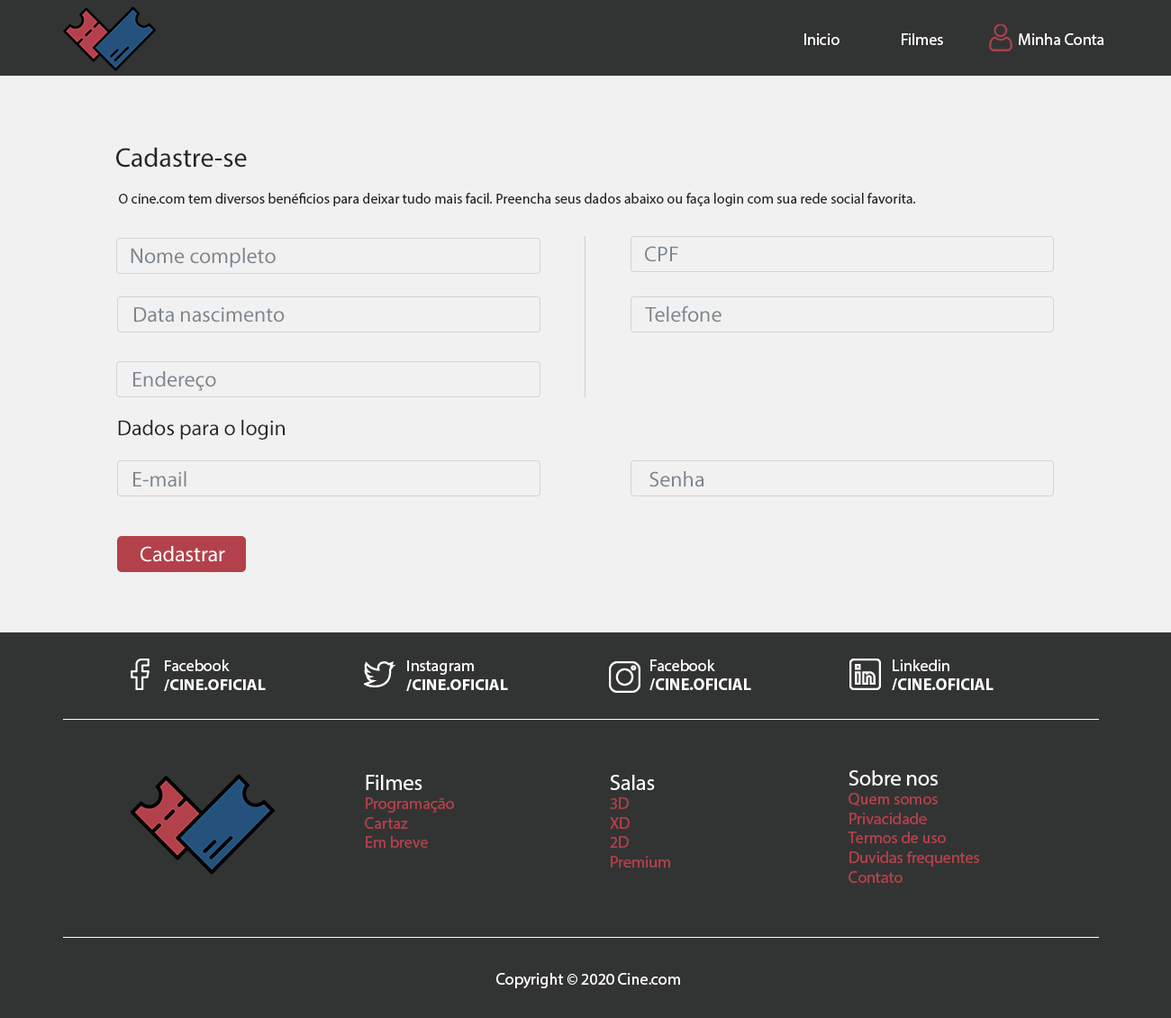
<style>
.page{position:relative;width:1171px;height:1018px;background:#f1f1f1}
.page>*{position:absolute;margin:0}
.t1{font:16.2px "MyriadPro-Regular";color:#ffffff}
.t2{font:27px "MyriadPro-Regular";color:#212529}
.t3{font:14.4px "MyriadPro-Regular";color:#212529}
.t4{font:21.6px "MyriadPro-Regular";color:#7d858c}
.t5{font:21.6px "MyriadPro-Regular";color:#212529}
.t6{font:21.6px "MyriadPro-Regular";color:#ffffff}
.t7{font:16px "MyriadPro-Bold";color:#ffffff}
.t8{font:16px "MyriadPro-Regular";color:#ffffff}
.t9{font:16.2px "MyriadPro-Bold";color:#ffffff}
.t10{font:16.2px "MyriadPro-Regular";color:#b3414b}
</style>
<div class="page">
<p class="t1" style="left:805px;top:33px;width:300px;height:12px">Inicio  Filmes        Minha Conta</p>
<p class="t2" style="left:116px;top:147px;width:131px;height:21px">Cadastre-se</p>
<p class="t3" style="left:119px;top:193px;width:797px;height:13px">O cine.com tem diversos benéficios para deixar tudo mais facil. Preencha seus dados abaixo ou faça login com sua rede social favorita.</p>
<p class="t4" style="left:645px;top:246px;width:33px;height:16px">CPF</p>
<p class="t4" style="left:131px;top:248px;width:145px;height:20px">Nome completo</p>
<p class="t4" style="left:645px;top:305px;width:77px;height:18px">Telefone</p>
<p class="t4" style="left:134px;top:307px;width:151px;height:16px">Data nascimento</p>
<p class="t4" style="left:133px;top:371px;width:83px;height:20px">Endereço</p>
<p class="t5" style="left:118px;top:420px;width:167px;height:20px">Dados para o login</p>
<p class="t4" style="left:133px;top:471px;width:53px;height:16px">E-mail</p>
<p class="t4" style="left:650px;top:471px;width:55px;height:16px">Senha</p>
<p class="t6" style="left:141px;top:546px;width:84px;height:16px">Cadastrar</p>
<p class="t7" style="left:164px;top:660px;width:102px;height:31px"><span class="t8">Facebook<br></span>/CINE.OFICIAL</p>
<p class="t7" style="left:406px;top:660px;width:102px;height:31px"><span class="t8">Instagram<br></span>/CINE.OFICIAL</p>
<p class="t9" style="left:650px;top:660px;width:101px;height:30px"><span class="t1">Facebook<br></span>/CINE.OFICIAL</p>
<p class="t9" style="left:892px;top:660px;width:102px;height:30px"><span class="t1">Linkedin<br></span>/CINE.OFICIAL</p>
<p class="t10" style="left:848px;top:770px;width:131px;height:113px"><span class="t6">Sobre nos<br></span>Quem somos<br>Privacidade<br>Termos de uso<br>Duvidas frequentes<br>Contato</p>
<p class="t10" style="left:365px;top:775px;width:89px;height:73px"><span class="t6">Filmes<br></span>Programação<br>Cartaz<br>Em breve</p>
<p class="t10" style="left:610px;top:775px;width:60px;height:93px"><span class="t6">Salas<br></span>3D<br>XD<br>2D<br>Premium</p>
<p class="t1" style="left:496px;top:973px;width:184px;height:15px">Copyright © 2020 Cine.com</p>
</div>
